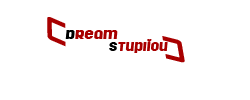
<style>
.page{position:relative;width:250px;height:100px;background:#ffffff}
.page>*{position:absolute;margin:0}
.t1{font:16.7px "StarsFighters";color:#a80000}
.t2{font:18px "Rollergirls";color:#a80000}
.t3{font:18px "Rollergirls";color:#000000}
.t4{font:16.7px "Rollergirls";color:#a80000}
.t5{font:16.7px "Rollergirls";color:#000000}
</style>
<div class="page">
<p class="t1" style="left:47px;top:17px;width:19px;height:30px;rotate:89deg">U</p>
<p class="t2" style="left:65px;top:30px;width:53px;height:9px"><span class="t3">d</span>ream</p>
<p class="t4" style="left:109px;top:39px;width:59px;height:14px"><span class="t5">s</span>tuPIiou</p>
<p class="t1" style="left:162px;top:36px;width:23px;height:27px;rotate:-100deg">U</p>
</div>
